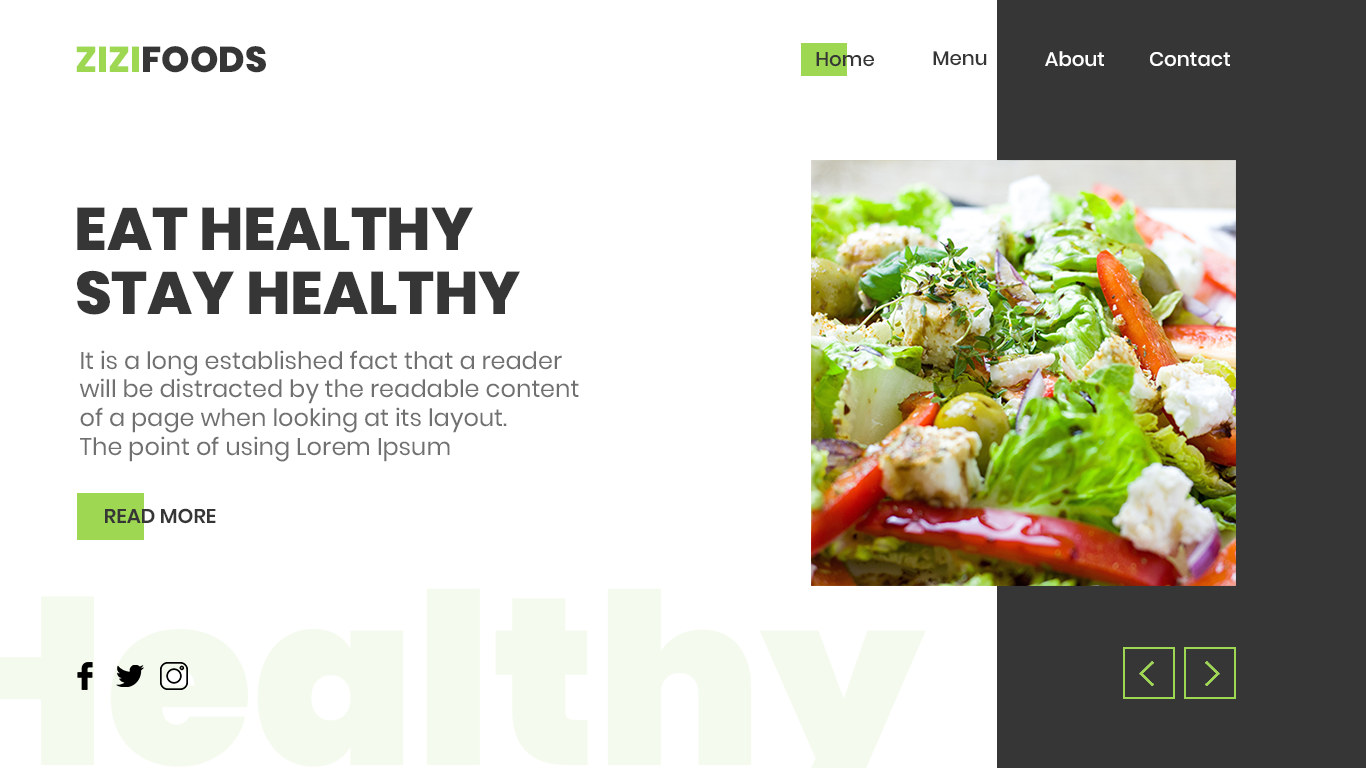
<style>
.page{position:relative;width:1366px;height:768px;background:#ffffff}
.page>*{position:absolute;margin:0}
.t1{font:36px "Poppins-ExtraBold";color:#363636}
.t2{font:36px "Poppins-ExtraBold";color:#9ed751}
.t3{font:19.8px "Poppins-Medium";color:#363636}
.t4{font:19.8px "Poppins-Medium";color:#ffffff}
.t5{font:60px "Poppins-ExtraBold";color:#363636}
.t6{font:24px "Poppins-Regular";color:#717070}
.t7{font:20px "Poppins-SemiBold";color:#363636}
</style>
<div class="page">
<p class="t1" style="left:76px;top:46px;width:190px;height:27px"><span class="t2">ZIZI</span>FOODS</p>
<p class="t3" style="left:816px;top:52px;width:58px;height:15px">Home</p>
<p class="t3" style="left:933px;top:51px;width:54px;height:15px">Menu</p>
<p class="t4" style="left:1045px;top:51px;width:59px;height:16px">About</p>
<p class="t4" style="left:1150px;top:52px;width:80px;height:15px">Contact</p>
<p class="t5" style="left:77px;top:207px;width:396px;height:43px">EAT HEALTHY</p>
<p class="t5" style="left:77px;top:270px;width:443px;height:45px">STAY HEALTHY</p>
<p class="t6" style="left:79px;top:350px;width:500px;height:112px">It is a long established fact that a reader <br>will be distracted by the readable content <br>of a page when looking at its layout. <br>The point of using Lorem Ipsum</p>
<p class="t7" style="left:105px;top:508px;width:111px;height:16px">READ MORE</p>
</div>
